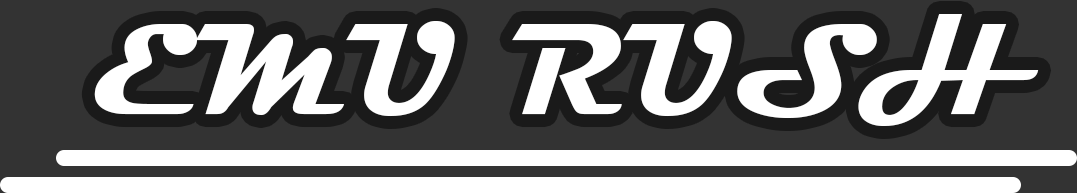
<style>
.page{position:relative;width:1077px;height:193px;background:#333333}
.page>*{position:absolute;margin:0}
.t1{font:131.1px "Magneto-Bold";letter-spacing:0.025em;color:#ffffff}
</style>
<div class="page">
<p class="t1" style="left:94px;top:14px;width:945px;height:112px">EMU RUSH</p>
</div>
